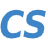
<style>
.page{position:relative;width:48px;height:48px;background:#ffffff}
.page>*{position:absolute;margin:0}
.t1{font:38px "DejaVuSansCondensed-BoldOblique";color:#3d85c6}
</style>
<div class="page">
<p class="t1" style="left:0px;top:9px;width:46px;height:30px">CS</p>
</div>
